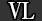
<style>
.page{position:relative;width:42px;height:21px;background:#333333}
.page>*{position:absolute;margin:0}
.t1{font:22px "RyuminPro-ExBold";letter-spacing:-0.08em;color:#ffffff;scale:0.9 1}
</style>
<div class="page">
<p class="t1" style="left:8px;top:2px;width:27px;height:17px">VL</p>
</div>
